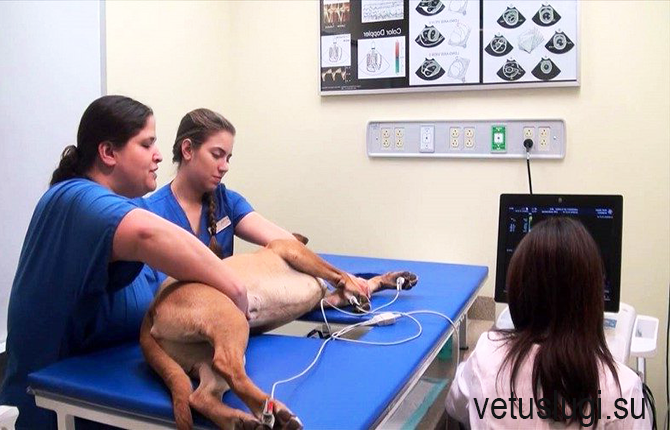
<style>
.page{position:relative;width:670px;height:430px}
.page>*{position:absolute;margin:0}
.t1{font:40px "ArialNarrow";letter-spacing:0.002em;color:#121314}
</style>
<div class="page">
<p class="t1" style="left:473px;top:390px;width:172px;height:37px">vetuslugi.su</p>
</div>
